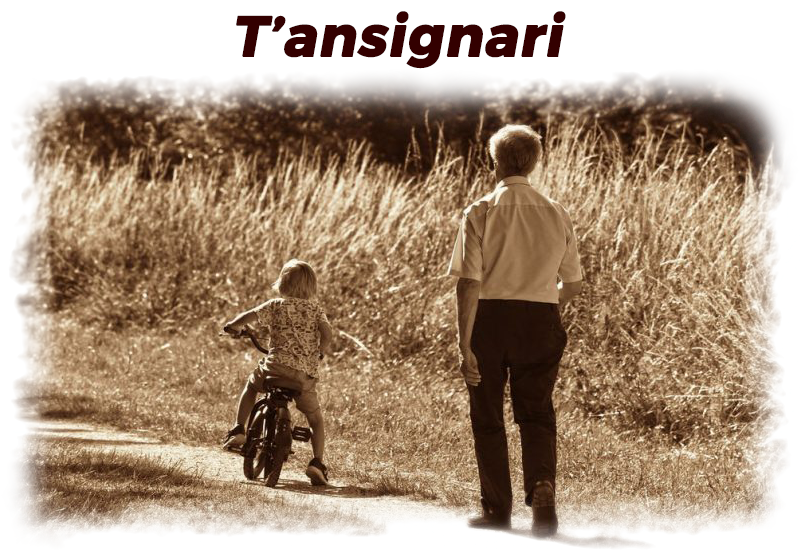
<style>
.page{position:relative;width:800px;height:550px}
.page>*{position:absolute;margin:0}
.t1{font:56px "TruenoBd";color:#330000;font-weight:bold;font-style:italic}
</style>
<div class="page">
<p class="t1" style="left:236px;top:11px;width:330px;height:58px">T’ansignari</p>
</div>
